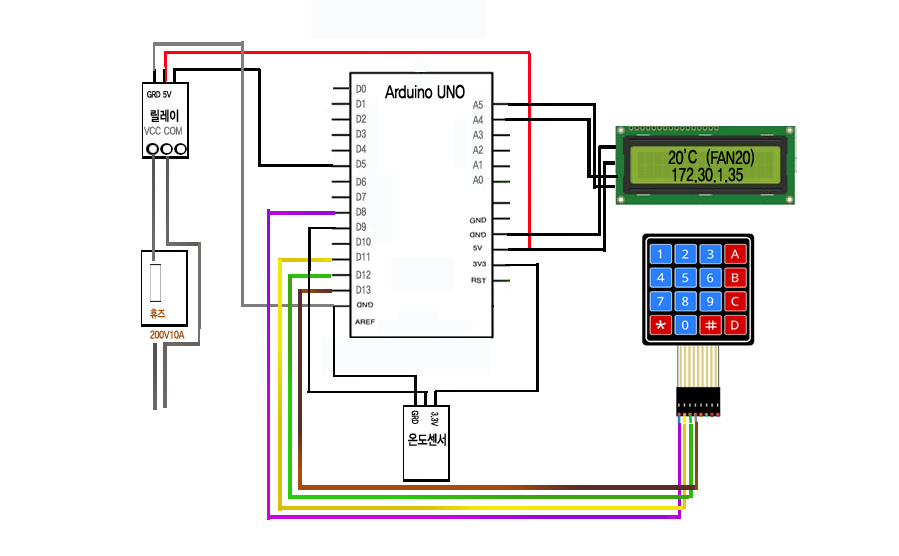
<style>
.page{position:relative;width:899px;height:556px;background:#ffffff}
.page>*{position:absolute;margin:0}
.t1{font:11px/3px "YDIYGO330";color:#6c6969;scale:0.75 1}
.t2{font:18px "YDIYGO330";color:#000000;scale:0.75 1}
.t3{font:9px "YDIYGO330";color:#010101;scale:0.75 1}
.t4{font:11px/3px "YDIYGO330";color:#6d7171;scale:0.75 1}
.t5{font:14px "YDIYGO330";color:#010101;scale:0.75 1}
.t6{font:11px "YDIYGO330";color:#74706d;scale:0.75 1}
.t7{font:18px "YDIYGO330";color:#020202;scale:0.75 1}
.t8{font:11px/3px "YDIYGO330";color:#a44d0c;scale:0.75 1}
</style>
<div class="page">
<p class="t1" style="left:356px;top:84px;width:15px;height:210px">D0<br><br><br><br><br>D1<br><br><br><br><br>D2<br><br><br><br><br>D3<br><br><br><br><br>D4<br><br><br><br><br>D5<br><br><br><br><br><br>D6<br><br><br><br><br>D7<br><br><br><br><br>D8<br><br><br><br><br>D9<br><br><br><br><br>D10<br><br><br><br><br>D11<br><br><br><br><br><br>D12<br><br><br><br><br>D13</p>
<p class="t2" style="left:385px;top:84px;width:80px;height:15px">Arduino UNO</p>
<p class="t3" style="left:147px;top:90px;width:14px;height:8px">GRD</p>
<p class="t3" style="left:163px;top:91px;width:9px;height:7px">5V</p>
<p class="t4" style="left:472px;top:100px;width:12px;height:84px">A5<br><br><br><br><br>A4<br><br><br><br><br>A3<br><br><br><br><br>A2<br><br><br><br><br>A1<br><br><br><br><br>A0</p>
<p class="t5" style="left:150px;top:109px;width:29px;height:13px">릴레이</p>
<p class="t6" style="left:143px;top:126px;width:39px;height:9px">VCC COM</p>
<p class="t7" style="left:668px;top:148px;width:86px;height:19px">20’  (FAN20)</p>
<p class="t7" style="left:688px;top:149px;width:9px;height:15px">C</p>
<p class="t7" style="left:672px;top:167px;width:71px;height:16px">172.30.1.35</p>
<p class="t8" style="left:150px;top:308px;width:35px;height:31px">휴즈<br><br><br><br><br><br><br>200V10A</p>
<p class="t3" style="left:411px;top:410px;width:8px;height:14px;rotate:89deg">GRD</p>
<p class="t3" style="left:430px;top:412px;width:9px;height:15px;rotate:91deg">3.3V</p>
<p class="t5" style="left:408px;top:433px;width:38px;height:13px">온도센서</p>
</div>
